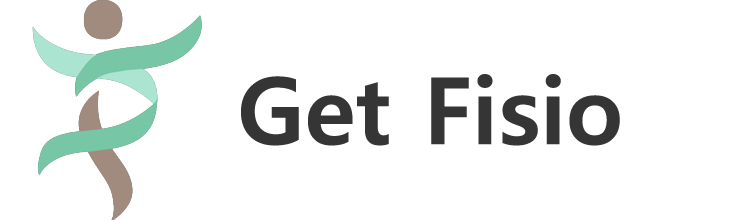
<style>
.page{position:relative;width:754px;height:220px;background:#ffffff}
.page>*{position:absolute;margin:0}
.t1{font:92.7px "MalgunGothicBold";color:#353535}
</style>
<div class="page">
<p class="t1" style="left:241px;top:74px;width:379px;height:72px">Get Fisio</p>
</div>
